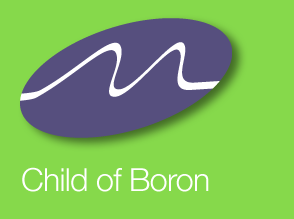
<style>
.page{position:relative;width:294px;height:219px;background:#86d94b}
.page>*{position:absolute;margin:0}
.t1{font:32px "HelveticaNeue-Light";letter-spacing:-0.02em;color:#ffffff}
</style>
<div class="page">
<p class="t1" style="left:22px;top:167px;width:187px;height:25px">Child of Boron</p>
</div>
